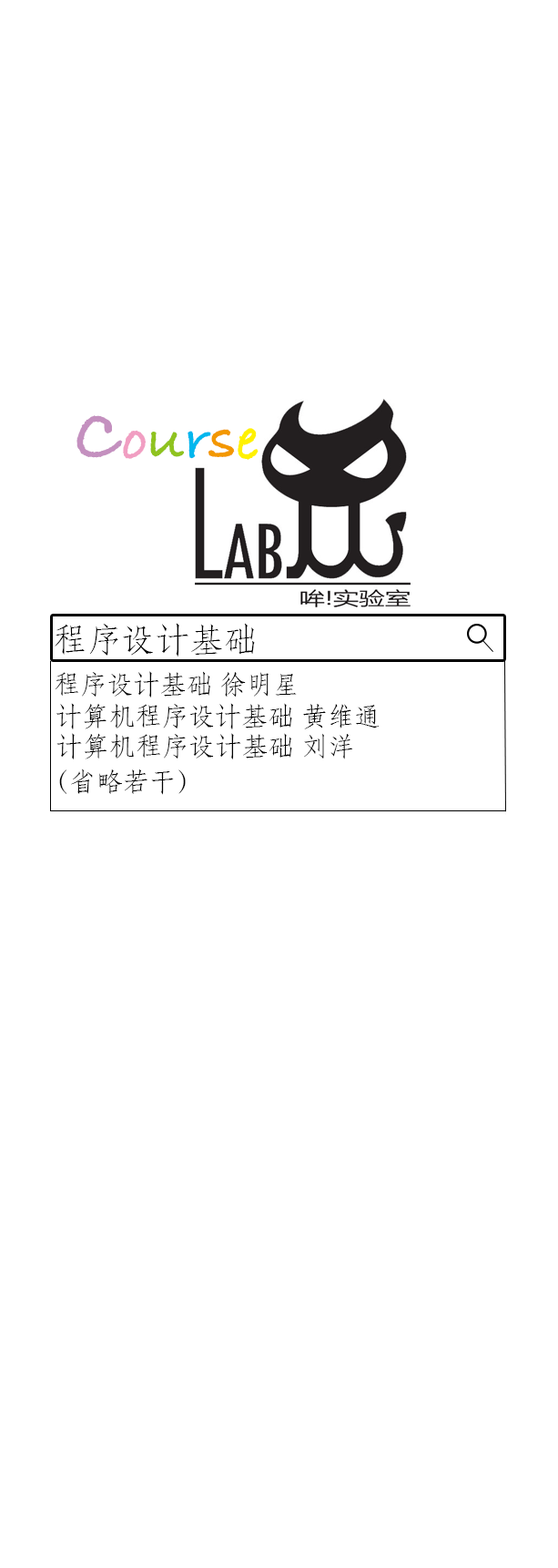
<style>
.page{position:relative;width:558px;height:1568px;background:#ffffff}
.page>*{position:absolute;margin:0}
.t1{font:75.9px "BradleyHandITCTTBold";color:#c490bf}
.t2{font:60.7px "BradleyHandITCTTBold";color:#f19ec2}
.t3{font:60.7px "BradleyHandITCTTBold";color:#8fc31f}
.t4{font:60.7px "BradleyHandITCTTBold";color:#00b7ee}
.t5{font:60.7px "BradleyHandITCTTBold";color:#f39800}
.t6{font:60.7px "BradleyHandITCTTBold";color:#fff100}
.t7{font:34.1px "STFangsong";color:#000000}
.t8{font:26.6px "STFangsong";color:#000000}
</style>
<div class="page">
<p class="t1" style="left:76px;top:415px;width:183px;height:45px">C<span class="t2">o</span><span class="t3">u</span><span class="t4">r</span><span class="t5">s</span><span class="t6">e</span></p>
<p class="t7" style="left:55px;top:623px;width:200px;height:34px">程序设计基础</p>
<p class="t8" style="left:55px;top:671px;width:242px;height:26px">程序设计基础 徐明星</p>
<p class="t8" style="left:56px;top:703px;width:324px;height:26px">计算机程序设计基础 黄维通</p>
<p class="t8" style="left:56px;top:733px;width:297px;height:26px">计算机程序设计基础 刘洋</p>
<p class="t8" style="left:59px;top:769px;width:127px;height:26px">（省略若干）</p>
</div>
